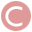
<style>
.page{position:relative;width:32px;height:32px;background:#e09999}
.page>*{position:absolute;margin:0}
.t1{font:31px "TwCenMT-Regular";letter-spacing:0.02em;color:#ffffff}
</style>
<div class="page">
<p class="t1" style="left:5px;top:6px;width:18px;height:21px">C</p>
</div>
